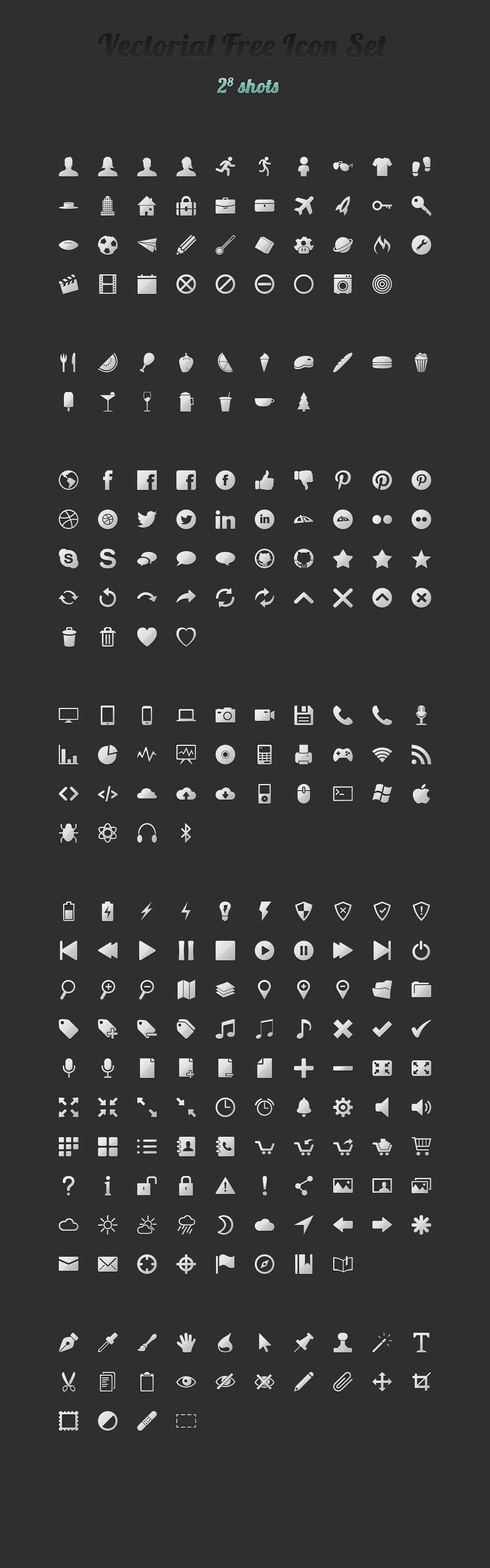
<style>
.page{position:relative;width:490px;height:1568px;background:#2f2f2f}
.page>*{position:absolute;margin:0}
.t1{font:31.4px "Lobster1.4";color:#232323;font-weight:bold}
.t2{font:19.6px "Lobster1.4";font-weight:bold}
</style>
<div class="page">
<p class="t1" style="left:98px;top:33px;width:289px;height:25px">Vectorial Free Icon Set</p>
<p class="t2" style="left:217px;top:78px;width:62px;height:15px">28 shots</p>
</div>
